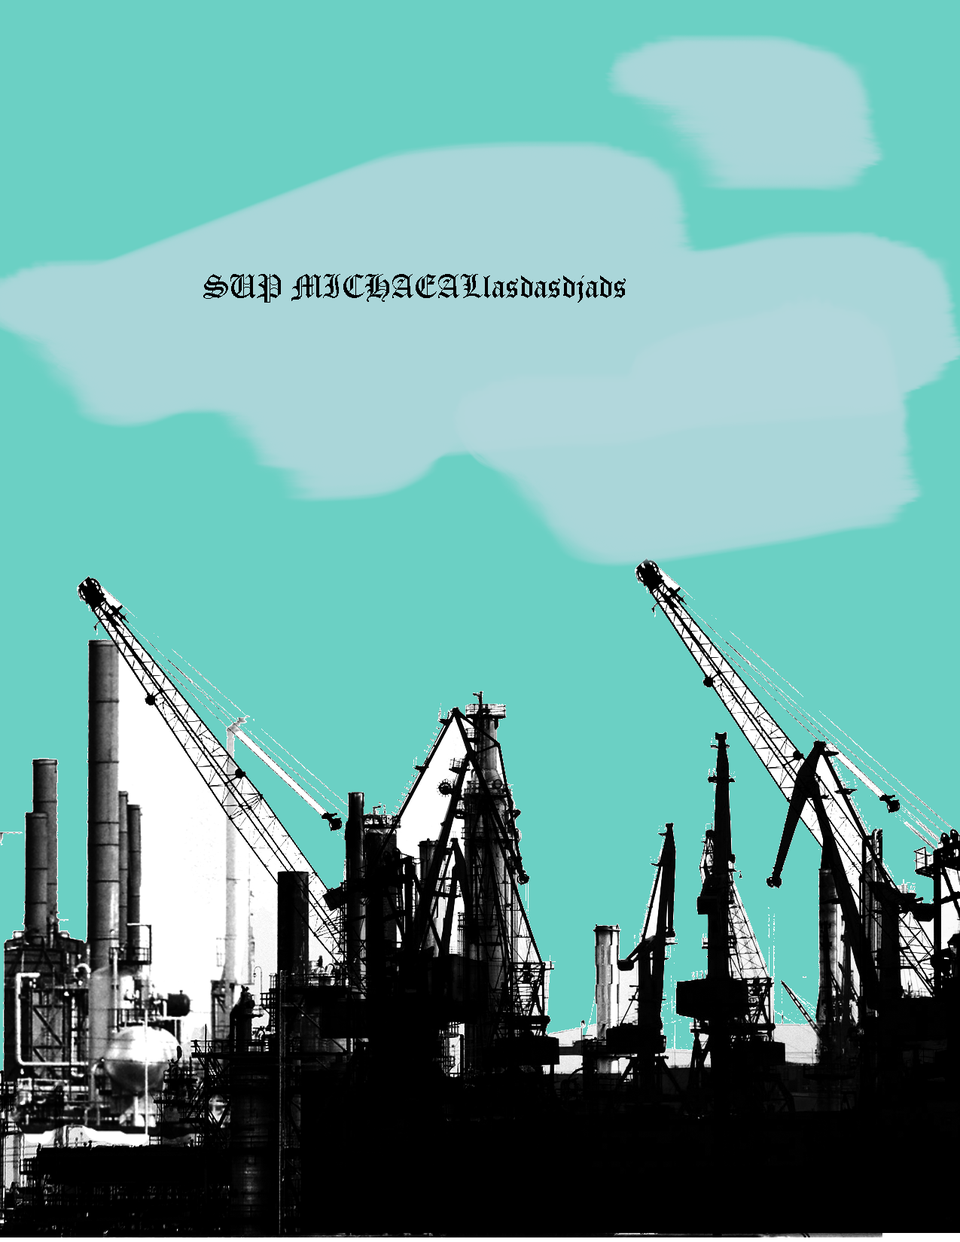
<style>
.page{position:relative;width:960px;height:1242px;background:#6bd0c4}
.page>*{position:absolute;margin:0}
.t1{font:31.4px "OldEnglishTextMT";color:#000000}
</style>
<div class="page">
<p class="t1" style="left:203px;top:274px;width:423px;height:29px">SUP MICHAEALlasdasdjads</p>
</div>
